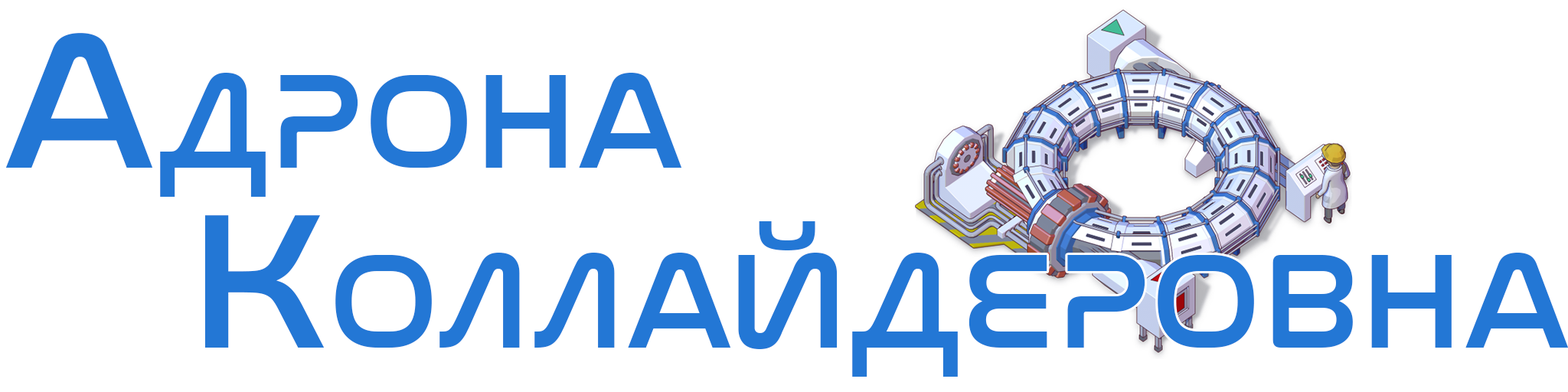
<style>
.page{position:relative;width:1568px;height:392px;background:#ffffff}
.page>*{position:absolute;margin:0}
.t1{font:196px "NasalizationRg-Regular";color:#2377d5;font-variant:small-caps}
</style>
<div class="page">
<p class="t1" style="left:5px;top:33px;width:677px;height:164px">Адрона</p>
<p class="t1" style="left:204px;top:215px;width:1365px;height:162px">Коллайдеровна</p>
</div>
